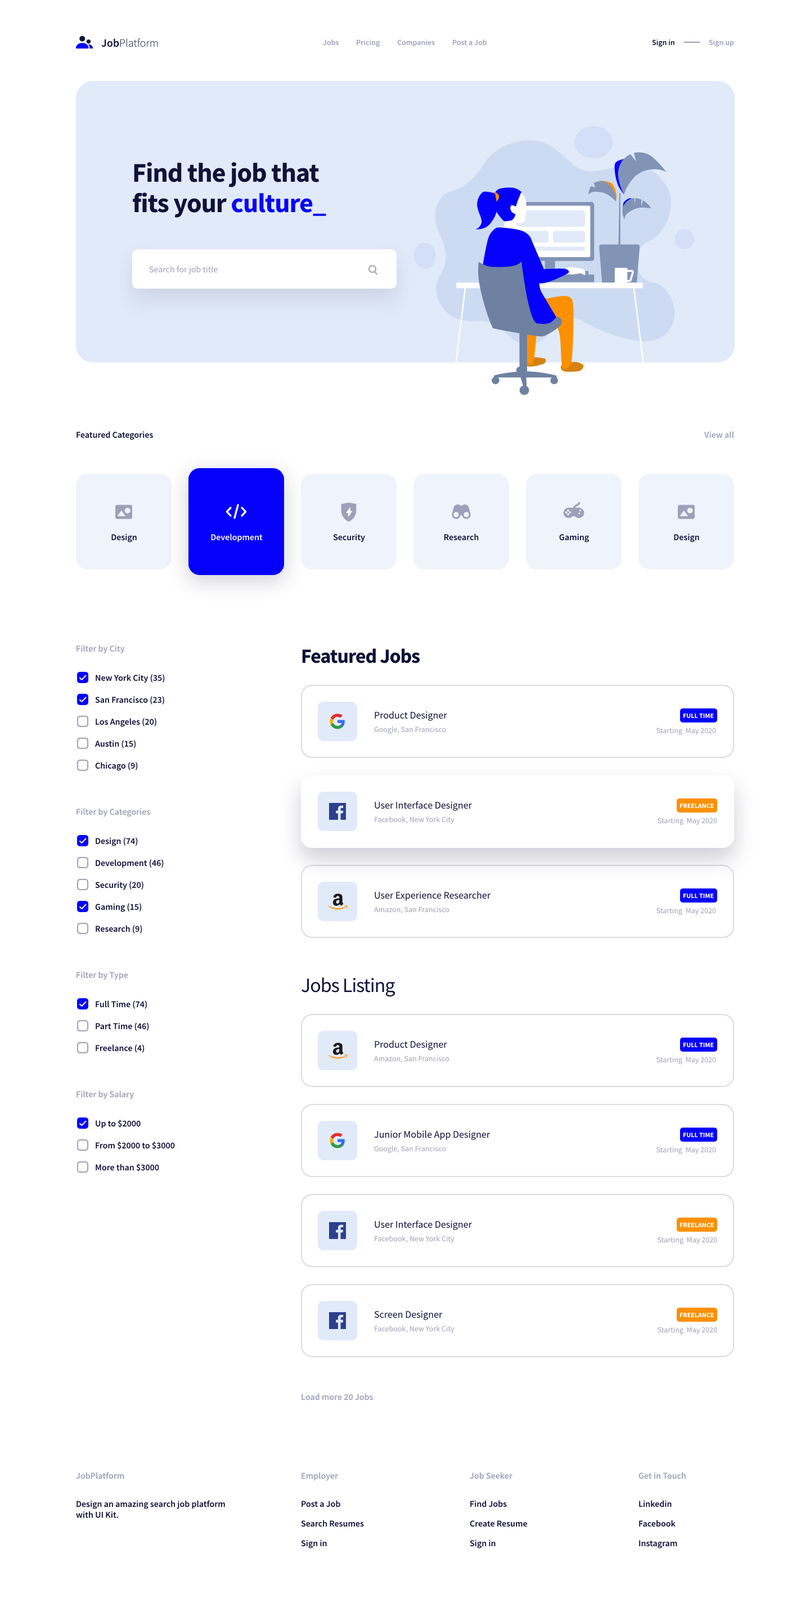
<style>
.page{position:relative;width:810px;height:1616px;background:#ffffff}
.page>*{position:absolute;margin:0}
.t1{font:11.2px "SourceSansPro-Light";color:#0f1137}
.t2{font:11.2px "SourceSansPro-Semibold";color:#0f1137}
.t3{font:7.9px "SourceSansPro-Semibold";color:#9f9fb7}
.t4{font:7.9px "SourceSansPro-Semibold";color:#0f1137}
.t5{font:27px/30.4px "SourceSansPro-Bold";letter-spacing:-0.021em;color:#0f1137}
.t6{font:27px/30.4px "SourceSansPro-Bold";letter-spacing:-0.021em;color:#0601fc}
.t7{font:9px "SourceSansPro-Regular";color:#9f9fb7}
.t8{font:9px "SourceSansPro-Semibold";color:#0f1137}
.t9{font:9px "SourceSansPro-Semibold";color:#9f9fb7}
.t10{font:9px "SourceSansPro-Semibold";color:#ffffff}
.t11{font:20.2px "SourceSansPro-Bold";letter-spacing:-0.028em;color:#0f1137}
.t12{font:10.1px "SourceSansPro-Regular";color:#0f1137}
.t13{font:6.8px "SourceSansPro-Bold";color:#ffffff}
.t14{font:7.9px "SourceSansPro-Regular";color:#9f9fb7}
.t15{font:20.2px "SourceSansPro-Regular";letter-spacing:-0.028em;color:#0f1137}
</style>
<div class="page">
<p class="t1" style="left:101px;top:38px;width:57px;height:9px"><span class="t2">Job</span>Platform</p>
<p class="t3" style="left:323px;top:39px;width:16px;height:7px">Jobs</p>
<p class="t3" style="left:357px;top:39px;width:23px;height:8px">Pricing</p>
<p class="t3" style="left:397px;top:39px;width:38px;height:8px">Companies</p>
<p class="t3" style="left:453px;top:39px;width:34px;height:7px">Post a Job</p>
<p class="t4" style="left:652px;top:39px;width:22px;height:8px">Sign in</p>
<p class="t3" style="left:709px;top:39px;width:25px;height:8px">Sign up</p>
<p class="t5" style="left:133px;top:162px;width:193px;height:56px">Find the job that<br>fits your <span class="t6">culture_</span></p>
<p class="t7" style="left:149px;top:266px;width:69px;height:8px">Search for job title</p>
<p class="t8" style="left:76px;top:431px;width:77px;height:9px">Featured Categories</p>
<p class="t9" style="left:704px;top:431px;width:30px;height:7px">View all</p>
<p class="t8" style="left:111px;top:533px;width:26px;height:9px">Design</p>
<p class="t10" style="left:211px;top:533px;width:52px;height:9px">Development</p>
<p class="t8" style="left:333px;top:533px;width:32px;height:9px">Security</p>
<p class="t8" style="left:444px;top:533px;width:35px;height:8px">Research</p>
<p class="t8" style="left:559px;top:533px;width:30px;height:9px">Gaming</p>
<p class="t8" style="left:674px;top:533px;width:25px;height:9px">Design</p>
<p class="t9" style="left:76px;top:645px;width:49px;height:9px">Filter by City</p>
<p class="t11" style="left:302px;top:648px;width:118px;height:15px">Featured Jobs</p>
<p class="t8" style="left:96px;top:674px;width:69px;height:9px">New York City (35)</p>
<p class="t8" style="left:95px;top:696px;width:69px;height:8px">San Francisco (23)</p>
<p class="t12" style="left:375px;top:711px;width:72px;height:10px">Product Designer</p>
<p class="t13" style="left:683px;top:713px;width:31px;height:5px">FULL TIME</p>
<p class="t8" style="left:96px;top:718px;width:60px;height:9px">Los Angeles (20)</p>
<p class="t14" style="left:374px;top:726px;width:72px;height:8px">Google, San Francisco</p>
<p class="t14" style="left:656px;top:727px;width:60px;height:8px">Starting  May 2020</p>
<p class="t8" style="left:94px;top:740px;width:42px;height:8px">Austin (15)</p>
<p class="t8" style="left:95px;top:762px;width:43px;height:9px">Chicago (9)</p>
<p class="t9" style="left:76px;top:808px;width:74px;height:9px">Filter by Categories</p>
<p class="t12" style="left:375px;top:800px;width:97px;height:11px">User Interface Designer</p>
<p class="t13" style="left:680px;top:803px;width:34px;height:5px">FREELANCE</p>
<p class="t14" style="left:375px;top:816px;width:79px;height:8px">Facebook, New York City</p>
<p class="t14" style="left:658px;top:817px;width:59px;height:8px">Starting  May 2020</p>
<p class="t8" style="left:96px;top:837px;width:42px;height:9px">Design (74)</p>
<p class="t8" style="left:96px;top:859px;width:68px;height:9px">Development (46)</p>
<p class="t8" style="left:95px;top:881px;width:48px;height:9px">Security (20)</p>
<p class="t12" style="left:375px;top:891px;width:116px;height:10px">User Experience Researcher</p>
<p class="t13" style="left:683px;top:893px;width:31px;height:5px">FULL TIME</p>
<p class="t8" style="left:95px;top:903px;width:47px;height:9px">Gaming (15)</p>
<p class="t14" style="left:374px;top:906px;width:75px;height:8px">Amazon, San Francisco</p>
<p class="t14" style="left:656px;top:907px;width:60px;height:8px">Starting  May 2020</p>
<p class="t8" style="left:96px;top:925px;width:46px;height:8px">Research (9)</p>
<p class="t9" style="left:76px;top:971px;width:52px;height:9px">Filter by Type</p>
<p class="t15" style="left:302px;top:977px;width:93px;height:20px">Jobs Listing</p>
<p class="t8" style="left:96px;top:1000px;width:51px;height:9px">Full Time (74)</p>
<p class="t8" style="left:96px;top:1022px;width:53px;height:8px">Part Time (46)</p>
<p class="t8" style="left:96px;top:1044px;width:49px;height:8px">Freelance (4)</p>
<p class="t12" style="left:375px;top:1040px;width:72px;height:10px">Product Designer</p>
<p class="t13" style="left:683px;top:1042px;width:31px;height:5px">FULL TIME</p>
<p class="t14" style="left:374px;top:1055px;width:75px;height:8px">Amazon, San Francisco</p>
<p class="t14" style="left:656px;top:1056px;width:60px;height:8px">Starting  May 2020</p>
<p class="t9" style="left:76px;top:1090px;width:58px;height:9px">Filter by Salary</p>
<p class="t8" style="left:96px;top:1119px;width:45px;height:9px">Up to $2000</p>
<p class="t12" style="left:374px;top:1130px;width:116px;height:10px">Junior Mobile App Designer</p>
<p class="t13" style="left:683px;top:1132px;width:31px;height:5px">FULL TIME</p>
<p class="t8" style="left:96px;top:1141px;width:79px;height:8px">From $2000 to $3000</p>
<p class="t14" style="left:374px;top:1145px;width:72px;height:8px">Google, San Francisco</p>
<p class="t14" style="left:656px;top:1146px;width:60px;height:8px">Starting  May 2020</p>
<p class="t8" style="left:96px;top:1163px;width:63px;height:8px">More than $3000</p>
<p class="t12" style="left:375px;top:1220px;width:97px;height:10px">User Interface Designer</p>
<p class="t13" style="left:680px;top:1222px;width:34px;height:5px">FREELANCE</p>
<p class="t14" style="left:375px;top:1235px;width:79px;height:8px">Facebook, New York City</p>
<p class="t14" style="left:658px;top:1236px;width:59px;height:8px">Starting  May 2020</p>
<p class="t12" style="left:374px;top:1310px;width:69px;height:10px">Screen Designer</p>
<p class="t13" style="left:680px;top:1312px;width:34px;height:5px">FREELANCE</p>
<p class="t14" style="left:375px;top:1325px;width:79px;height:8px">Facebook, New York City</p>
<p class="t14" style="left:658px;top:1326px;width:59px;height:8px">Starting  May 2020</p>
<p class="t9" style="left:302px;top:1393px;width:71px;height:7px">Load more 20 Jobs</p>
<p class="t9" style="left:76px;top:1472px;width:48px;height:7px">JobPlatform</p>
<p class="t9" style="left:302px;top:1472px;width:37px;height:8px">Employer</p>
<p class="t9" style="left:470px;top:1472px;width:42px;height:7px">Job Seeker</p>
<p class="t9" style="left:638px;top:1472px;width:48px;height:7px">Get in Touch</p>
<p class="t8" style="left:76px;top:1500px;width:149px;height:18px">Design an amazing search job platform with UI Kit.</p>
<p class="t8" style="left:302px;top:1500px;width:38px;height:7px">Post a Job</p>
<p class="t8" style="left:470px;top:1500px;width:37px;height:7px">Find Jobs</p>
<p class="t8" style="left:639px;top:1500px;width:33px;height:7px">Linkedin</p>
<p class="t8" style="left:301px;top:1519px;width:63px;height:8px">Search Resumes</p>
<p class="t8" style="left:470px;top:1520px;width:57px;height:7px">Create Resume</p>
<p class="t8" style="left:639px;top:1519px;width:37px;height:8px">Facebook</p>
<p class="t8" style="left:301px;top:1539px;width:26px;height:9px">Sign in</p>
<p class="t8" style="left:470px;top:1539px;width:26px;height:9px">Sign in</p>
<p class="t8" style="left:639px;top:1540px;width:38px;height:8px">Instagram</p>
</div>
